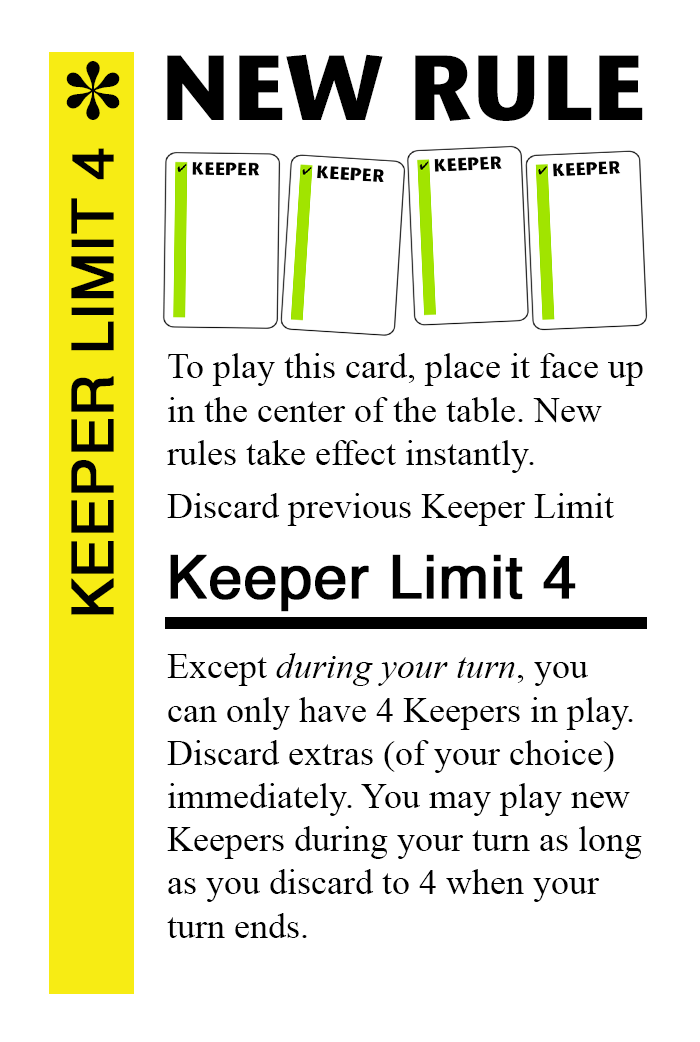
<style>
.page{position:relative;width:700px;height:1042px;background:#ffffff}
.page>*{position:absolute;margin:0}
.t1{font:92px "StoneSansITC-Bold";color:#000000}
.t2{font:82px "MS-Gothic";color:#000000}
.t3{font:58px "Helvetica";color:#000000;font-weight:bold}
.t4{font:36px "TimesNewRomanPSMT";color:#000000}
.t5{font:60px "Helvetica";color:#000000;font-weight:bold}
.t6{font:36px "TimesNewRomanPS-ItalicMT";color:#000000}
</style>
<div class="page">
<p class="t1" style="left:167px;top:54px;width:476px;height:67px">NEW RULE</p>
<p class="t2" style="left:66px;top:61px;width:54px;height:59px">✽</p>
<p class="t3" style="left:71px;top:148px;width:43px;height:467px;rotate:-90deg">KEEPER LIMIT 4</p>
<p class="t4" style="left:167px;top:353px;width:476px;height:120px">To play this card, place it face up<br>in the center of the table. New <br>rules take effect instantly.</p>
<p class="t4" style="left:167px;top:493px;width:447px;height:33px">Discard previous Keeper Limit</p>
<p class="t5" style="left:170px;top:554px;width:406px;height:58px">Keeper Limit 4</p>
<p class="t4" style="left:167px;top:653px;width:475px;height:285px">Except <span class="t6">during your turn</span>, you<br>can only have 4 Keepers in play.<br>Discard extras (of your choice)<br>immediately. You may play new<br>Keepers during your turn as long<br>as you discard to 4 when your<br>turn ends.</p>
</div>
